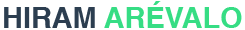
<style>
.page{position:relative;width:245px;height:30px;background:#ffffff}
.page>*{position:absolute;margin:0}
.t1{font:28.9px "Helvetica-Bold";color:#36dd84;text-transform:uppercase}
.t2{font:28.9px "Helvetica-Bold";color:#2c3e50;text-transform:uppercase}
</style>
<div class="page">
<p class="t1" style="left:4px;top:1px;width:238px;height:27px"><span class="t2">Hiram </span>arévalo</p>
</div>
